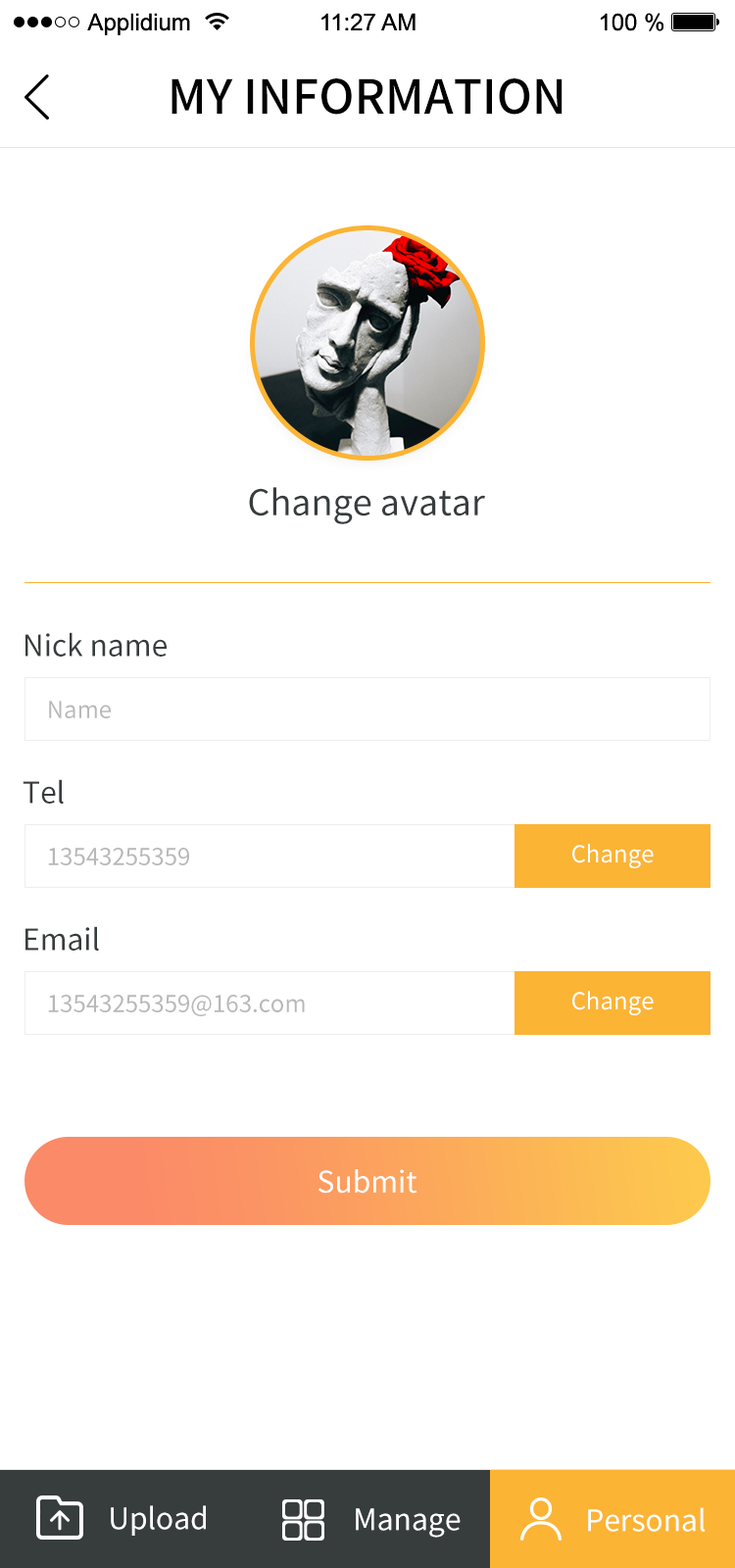
<style>
.page{position:relative;width:735px;height:1568px;background:#ffffff}
.page>*{position:absolute;margin:0}
.t1{font:47px "SourceHanSansCN-Medium";color:#010101;text-transform:uppercase}
.t2{font:35.3px "SourceHanSansCN-Regular";color:#373c3d}
.t3{font:29.4px "SourceHanSansCN-Regular";color:#373c3d}
.t4{font:23.5px "SourceHanSansCN-Regular";color:#b8b8b8}
.t5{font:23.5px "SourceHanSansCN-Regular";color:#ffffff}
.t6{font:29.4px "SourceHanSansCN-Regular";color:#ffffff}
</style>
<div class="page">
<p class="t1" style="left:172px;top:78px;width:391px;height:37px">my information</p>
<p class="t2" style="left:249px;top:487px;width:236px;height:37px">Change avatar</p>
<p class="t3" style="left:25px;top:632px;width:142px;height:25px">Nick name</p>
<p class="t4" style="left:49px;top:701px;width:62px;height:17px">Name</p>
<p class="t3" style="left:23px;top:779px;width:41px;height:25px">Tel</p>
<p class="t5" style="left:572px;top:844px;width:82px;height:24px">Change</p>
<p class="t4" style="left:48px;top:848px;width:141px;height:17px">13543255359</p>
<p class="t3" style="left:25px;top:926px;width:74px;height:25px">Email</p>
<p class="t4" style="left:48px;top:995px;width:257px;height:21px">13543255359@163.com</p>
<p class="t5" style="left:572px;top:991px;width:82px;height:24px">Change</p>
<p class="t6" style="left:318px;top:1169px;width:99px;height:25px">Submit</p>
<p class="t6" style="left:111px;top:1505px;width:95px;height:31px">Upload</p>
<p class="t6" style="left:356px;top:1508px;width:105px;height:30px">Manage</p>
<p class="t6" style="left:588px;top:1507px;width:118px;height:25px">Personal</p>
</div>
